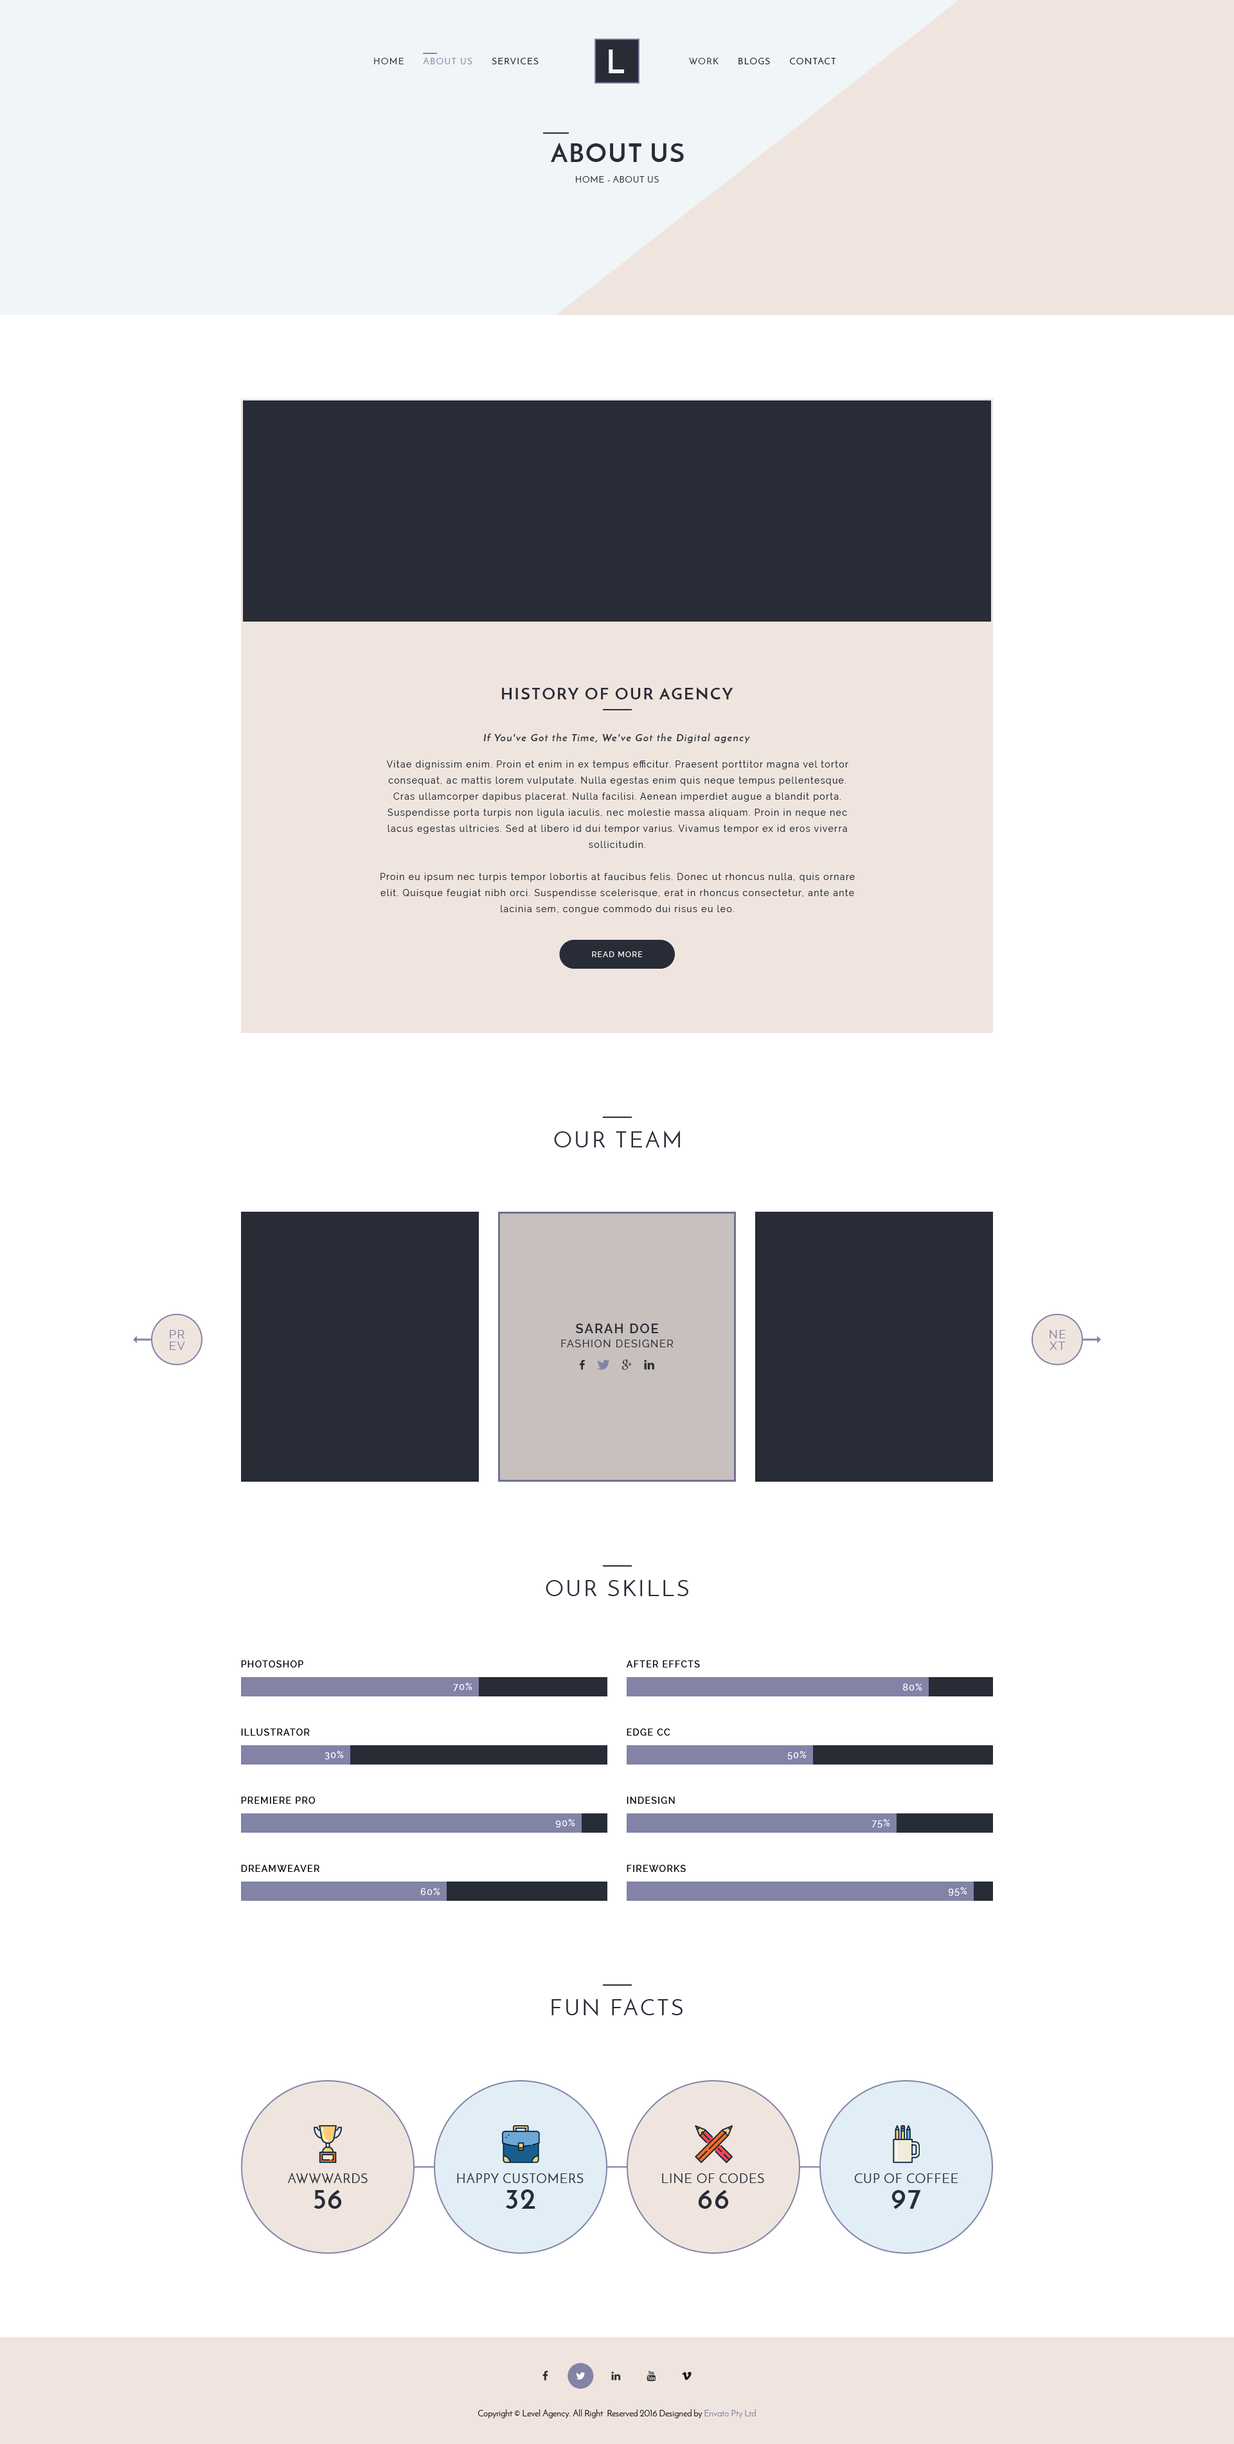
<style>
.page{position:relative;width:1234px;height:2444px;background:#ffffff}
.page>*{position:absolute;margin:0}
.t1{font:32.1px "JosefinSans-Bold";letter-spacing:0.4em;color:#f0f5f7;text-transform:uppercase}
.t2{font:9px "JosefinSans";letter-spacing:0.1em;color:#8283a7;text-transform:uppercase}
.t3{font:9px "JosefinSans";letter-spacing:0.1em;color:#282c37;text-transform:uppercase}
.t4{font:9px "JosefinSans";letter-spacing:0.1em;color:#141414;text-transform:uppercase}
.t5{font:25.7px "JosefinSans-Bold";letter-spacing:0.05em;color:#282c37;text-transform:uppercase}
.t6{font:9px "JosefinSans";letter-spacing:0.05em;color:#282c37;text-transform:uppercase}
.t7{font:16.1px "JosefinSans-Bold";letter-spacing:0.1em;color:#282c37;text-transform:uppercase}
.t8{font:10.3px "JosefinSans-SemiBold";letter-spacing:0.1em;color:#282c37}
.t9{font:9px/16.1px "Raleway";letter-spacing:0.1em;color:#282c37}
.t10{font:7.7px "Raleway-Medium";letter-spacing:0.1em;color:#ffffff;text-transform:uppercase}
.t11{font:22.5px "JosefinSans";letter-spacing:0.1em;color:#282c37;text-transform:uppercase}
.t12{font:12.9px "Raleway-SemiBold";letter-spacing:0.1em;color:#282c37;text-transform:uppercase}
.t13{font:11.6px/11.6px "Raleway";letter-spacing:0.1em;color:#8283a7;text-transform:uppercase}
.t14{font:10.3px "Raleway";letter-spacing:0.1em;color:#282c37;text-transform:uppercase}
.t15{font:9px "Raleway-Medium";letter-spacing:0.1em;color:#000000;text-transform:uppercase}
.t16{font:9px "Raleway-Medium";letter-spacing:0.1em;color:#ffffff}
.t17{font:12.9px "JosefinSans";letter-spacing:0.05em;color:#282c37;text-transform:uppercase}
.t18{font:28.9px "JosefinSans-Bold";letter-spacing:0.05em;color:#282c37;text-transform:uppercase}
.t19{font:9px "JosefinSans";color:#141414}
.t20{font:9px "JosefinSans";color:#8283a7}
</style>
<div class="page">
<p class="t1" style="left:609px;top:50px;width:15px;height:23px">L</p>
<p class="t2" style="left:374px;top:57px;width:165px;height:8px"><span class="t3">HOME      </span>ABOUT US<span class="t4">      SERVICES</span></p>
<p class="t4" style="left:689px;top:57px;width:147px;height:8px"><span class="t3">WORK</span>      BLOGS      CONTACT</p>
<p class="t5" style="left:551px;top:142px;width:133px;height:20px">About Us</p>
<p class="t6" style="left:576px;top:176px;width:83px;height:7px">Home - About Us</p>
<p class="t7" style="left:502px;top:687px;width:232px;height:13px">History of Our Agency</p>
<p class="t8" style="left:483px;top:733px;width:267px;height:10px">If You've Got the Time, We've Got the Digital agency</p>
<p class="t9" style="left:381px;top:760px;width:474px;height:154px;text-align:center">Vitae dignissim enim. Proin et enim in ex tempus efficitur. Praesent porttitor magna vel tortor consequat, ac mattis lorem vulputate. Nulla egestas enim quis neque tempus pellentesque. Cras ullamcorper dapibus placerat. Nulla facilisi. Aenean imperdiet augue a blandit porta. <br>Suspendisse porta turpis non ligula iaculis, nec molestie massa aliquam. Proin in neque nec lacus egestas ultricies. Sed at libero id dui tempor varius. Vivamus tempor ex id eros viverra <br>sollicitudin.<br><br>Proin eu ipsum nec turpis tempor lobortis at faucibus felis. Donec ut rhoncus nulla, quis ornare elit. Quisque feugiat nibh orci. Suspendisse scelerisque, erat in rhoncus consectetur, ante ante lacinia sem, congue commodo dui risus eu leo.</p>
<p class="t10" style="left:592px;top:951px;width:51px;height:6px">Read more</p>
<p class="t11" style="left:554px;top:1130px;width:126px;height:18px">Our Team</p>
<p class="t12" style="left:576px;top:1324px;width:82px;height:9px">Sarah Doe</p>
<p class="t13" style="left:170px;top:1330px;width:15px;height:20px;text-align:center">Pr<br>ev</p>
<p class="t13" style="left:1050px;top:1330px;width:16px;height:20px;text-align:center">Ne<br>Xt</p>
<p class="t14" style="left:561px;top:1340px;width:113px;height:7px">Fashion Designer</p>
<p class="t11" style="left:546px;top:1580px;width:142px;height:16px">Our Skills</p>
<p class="t15" style="left:241px;top:1661px;width:62px;height:7px">Photoshop</p>
<p class="t15" style="left:626px;top:1661px;width:74px;height:7px">After Effcts</p>
<p class="t16" style="left:453px;top:1683px;width:20px;height:8px">70%</p>
<p class="t16" style="left:903px;top:1684px;width:20px;height:7px">80%</p>
<p class="t15" style="left:241px;top:1729px;width:69px;height:7px">Illustrator</p>
<p class="t15" style="left:627px;top:1729px;width:43px;height:7px">Edge CC</p>
<p class="t16" style="left:325px;top:1751px;width:19px;height:9px">30%</p>
<p class="t16" style="left:788px;top:1751px;width:19px;height:9px">50%</p>
<p class="t15" style="left:241px;top:1797px;width:74px;height:7px">Premiere Pro</p>
<p class="t15" style="left:627px;top:1797px;width:48px;height:7px">InDesign</p>
<p class="t16" style="left:555px;top:1819px;width:20px;height:9px">90%</p>
<p class="t16" style="left:872px;top:1819px;width:18px;height:9px">75%</p>
<p class="t15" style="left:241px;top:1865px;width:79px;height:7px">Dreamweaver</p>
<p class="t15" style="left:627px;top:1865px;width:59px;height:7px">Fireworks</p>
<p class="t16" style="left:420px;top:1888px;width:20px;height:7px">60%</p>
<p class="t16" style="left:948px;top:1887px;width:20px;height:9px">95%</p>
<p class="t11" style="left:552px;top:1998px;width:131px;height:18px">Fun Facts</p>
<p class="t17" style="left:287px;top:2173px;width:81px;height:11px">Awwwards</p>
<p class="t17" style="left:457px;top:2173px;width:127px;height:10px">Happy Customers</p>
<p class="t17" style="left:662px;top:2173px;width:102px;height:11px">Line of Codes</p>
<p class="t17" style="left:854px;top:2174px;width:105px;height:9px">Cup of Coffee</p>
<p class="t18" style="left:314px;top:2190px;width:28px;height:19px">56</p>
<p class="t18" style="left:506px;top:2190px;width:30px;height:19px">32</p>
<p class="t18" style="left:698px;top:2190px;width:31px;height:19px">66</p>
<p class="t18" style="left:892px;top:2190px;width:29px;height:20px">97</p>
<p class="t19" style="left:478px;top:2409px;width:278px;height:9px">Copyright © Level Agency. All Right  Reserved 2016 Designed by <span class="t20">Envato Pty Ltd</span></p>
</div>
